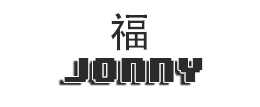
<style>
.page{position:relative;width:260px;height:107px;background:#ffffff}
.page>*{position:absolute;margin:0}
.t1{font:41.8px "AdobeHeitiStd-Regular";color:#2b2b2b}
.t2{font:28.4px "8BITWONDERNominal";color:#2b2b2b}
</style>
<div class="page">
<p class="t1" style="left:111px;top:13px;width:36px;height:38px">福</p>
<p class="t2" style="left:64px;top:58px;width:139px;height:24px">Jonny</p>
<p class="t2" style="left:64px;top:58px;width:139px;height:24px">Jonny</p>
</div>
